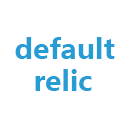
<style>
.page{position:relative;width:128px;height:128px;background:#ffffff}
.page>*{position:absolute;margin:0}
.t1{font:28px "MicrosoftYaHei-Bold";color:#269cd5}
</style>
<div class="page">
<p class="t1" style="left:15px;top:37px;width:100px;height:22px">default</p>
<p class="t1" style="left:35px;top:69px;width:57px;height:22px">relic</p>
</div>
